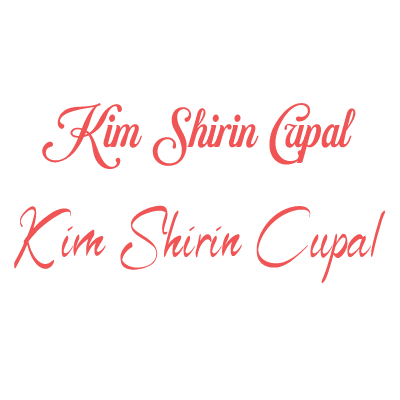
<style>
.page{position:relative;width:400px;height:400px;background:#ffffff}
.page>*{position:absolute;margin:0}
.t1{font:44.2px "WhiteDreamPERSONALUSEONLY-Regular";color:#f05454}
.t2{font:94.3px "Signature";color:#f05454}
</style>
<div class="page">
<p class="t1" style="left:36px;top:101px;width:321px;height:70px">Kim Shirin Cupal</p>
<p class="t2" style="left:14px;top:205px;width:372px;height:79px">Kim Shirin Cupal</p>
</div>
